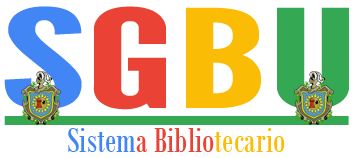
<style>
.page{position:relative;width:355px;height:158px;background:#ffffff}
.page>*{position:absolute;margin:0}
.t1{font:136.4px "LeagueGothic-Regular";color:#4285f4;scale:1.83 1}
.t2{font:136.4px "LeagueGothic-Regular";color:#ea4335;scale:1.83 1}
.t3{font:136.4px "LeagueGothic-Regular";color:#fbbc05;scale:1.83 1}
.t4{font:136.4px "LeagueGothic-Regular";color:#34a853;scale:1.83 1}
.t5{font:37px "BodoniMTCondensed";color:#ea4335}
.t6{font:37px "BodoniMTCondensed";color:#4285f4}
.t7{font:37px "BodoniMTCondensed";color:#fbbc05}
</style>
<div class="page">
<p class="t1" style="left:4px;top:6px;width:345px;height:104px">S<span class="t2">G</span><span class="t3">B</span><span class="t4">U</span></p>
<p class="t5" style="left:68px;top:128px;width:217px;height:24px"><span class="t6">Sistem</span>a Biblio<span class="t7">tecario</span></p>
</div>
